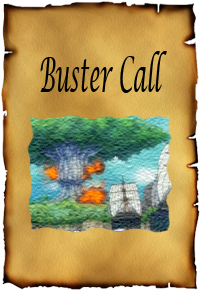
<style>
.page{position:relative;width:200px;height:290px}
.page>*{position:absolute;margin:0}
.t1{font:48px "LucidaCalligraphy-Italic";color:#000000;scale:0.43 1}
</style>
<div class="page">
<p class="t1" style="left:40px;top:51px;width:127px;height:42px">Buster Call</p>
</div>
